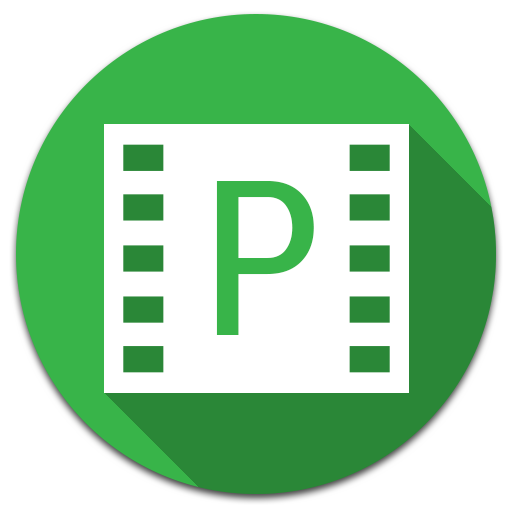
<style>
.page{position:relative;width:512px;height:512px;background:#ffffff}
.page>*{position:absolute;margin:0}
.t1{font:216.7px "RobotoCondensed-Regular";color:#39b54a}
</style>
<div class="page">
<p class="t1" style="left:216px;top:181px;width:98px;height:154px">P</p>
</div>
